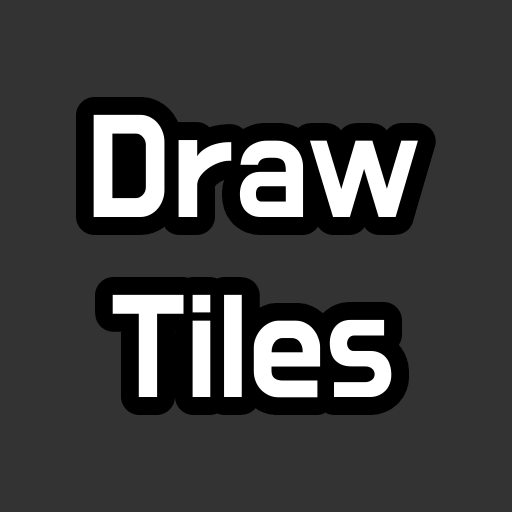
<style>
.page{position:relative;width:512px;height:512px;background:#333333}
.page>*{position:absolute;margin:0}
.t1{font:150px "DoHyeon-Regular";color:#ffffff}
</style>
<div class="page">
<p class="t1" style="left:93px;top:114px;width:325px;height:284px;text-align:center">Draw<br>Tiles</p>
</div>
